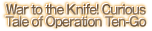
<style>
.page{position:relative;width:152px;height:31px}
.page>*{position:absolute;margin:0}
.t1{font:13px/12px "GothicMB101Pro-DeBold";letter-spacing:-0.08em;color:#7f6951;scale:0.9 1}
</style>
<div class="page">
<p class="t1" style="left:5px;top:4px;width:142px;height:25px;text-align:center">War to the Knife! Curious<br>Tale of Operation Ten-Go</p>
</div>
